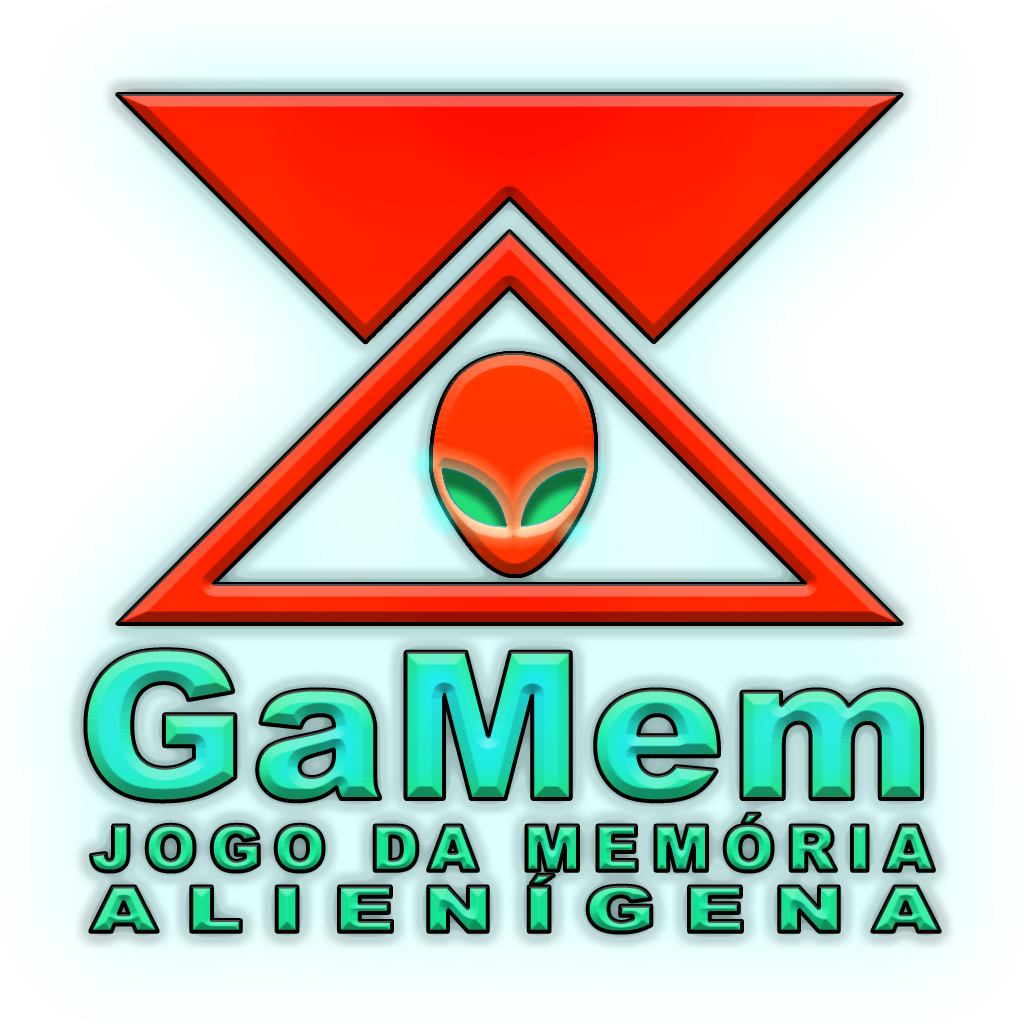
<style>
.page{position:relative;width:1024px;height:1024px}
.page>*{position:absolute;margin:0}
.t1{font:203.1px "Arial-Black";font-weight:bold}
.t2{font:62px/60.9px "Arial-Black";letter-spacing:0.175em;font-weight:bold}
.t3{font:62px/60.9px "Arial-Black";letter-spacing:0.325em;font-weight:bold;scale:1.35 1}
</style>
<div class="page">
<p class="t1" style="left:85px;top:649px;width:837px;height:153px">GaMem</p>
<p class="t2" style="left:90px;top:813px;width:850px;height:120px">JOGO DA MEMÓRIA<br><span class="t3">ALIENÍGENA</span></p>
</div>
